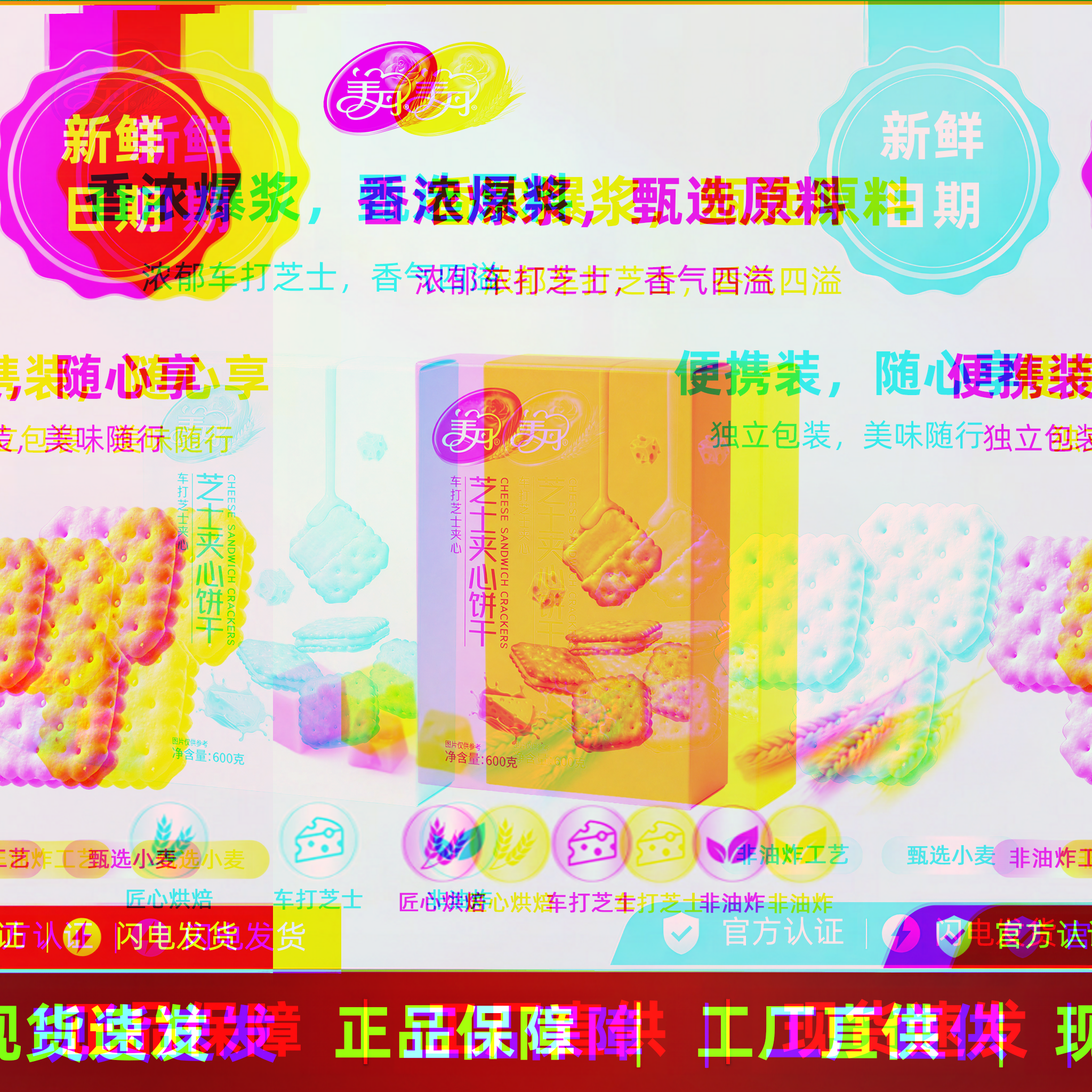
<style>
.page{position:relative;width:1092px;height:1092px}
.page>*{position:absolute;margin:0}
.t1{font:54.2px "AlibabaPuHuiTi-Bold";color:#fae7e9}
.t2{font:55.5px "AlibabaPuHuiTi-Bold"}
.t3{font:53.3px "AlibabaPuHuiTi-Bold";color:#f9e7e7}
.t4{font:33.3px "AlibabaPuHuiTi-Regular"}
.t5{font:50.7px "AlibabaPuHuiTi-Bold"}
.t6{font:31.1px "AlibabaPuHuiTi-Regular"}
.t7{font:22.7px "AlibabaPuHuiTi-Regular";font-weight:bold}
.t8{font:22.2px "AlibabaPuHuiTi-Regular";font-weight:bold}
.t9{font:31.5px "AlibabaPuHuiTi-Regular"}
.t10{font:62.2px "AlibabaPuHuiTi-Bold"}
.t11{font:63.1px "AlibabaPuHuiTi-Bold"}
.t12{font:63.5px "AlibabaPuHuiTi-Bold"}
</style>
<div class="page">
<p class="t1" style="left:880px;top:109px;width:103px;height:50px">新鲜</p>
<p class="t2" style="left:85px;top:170px;width:488px;height:53px">香浓爆浆，甄选原料</p>
<p class="t3" style="left:887px;top:180px;width:92px;height:49px">日期</p>
<p class="t4" style="left:142px;top:260px;width:358px;height:32px">浓郁车打芝士，香气四溢</p>
<p class="t5" style="left:674px;top:348px;width:345px;height:48px">便携装，随心享</p>
<p class="t6" style="left:710px;top:419px;width:274px;height:30px">独立包装，美味随行</p>
<p class="t7" style="left:736px;top:842px;width:113px;height:22px">非油炸工艺</p>
<p class="t8" style="left:907px;top:844px;width:88px;height:20px">甄选小麦</p>
<p class="t8" style="left:126px;top:887px;width:87px;height:21px">匠心烘焙</p>
<p class="t7" style="left:273px;top:887px;width:90px;height:22px">车打芝士</p>
<p class="t8" style="left:427px;top:888px;width:65px;height:21px">非油炸</p>
<p class="t9" style="left:723px;top:915px;width:121px;height:30px">官方认证</p>
<p class="t9" style="left:936px;top:916px;width:120px;height:30px">闪电发货</p>
<p class="t10" style="left:62px;top:1000px;width:239px;height:56px">正品保障</p>
<p class="t11" style="left:425px;top:998px;width:241px;height:58px">工厂直供</p>
<p class="t12" style="left:782px;top:998px;width:245px;height:60px">现货速发</p>
</div>
